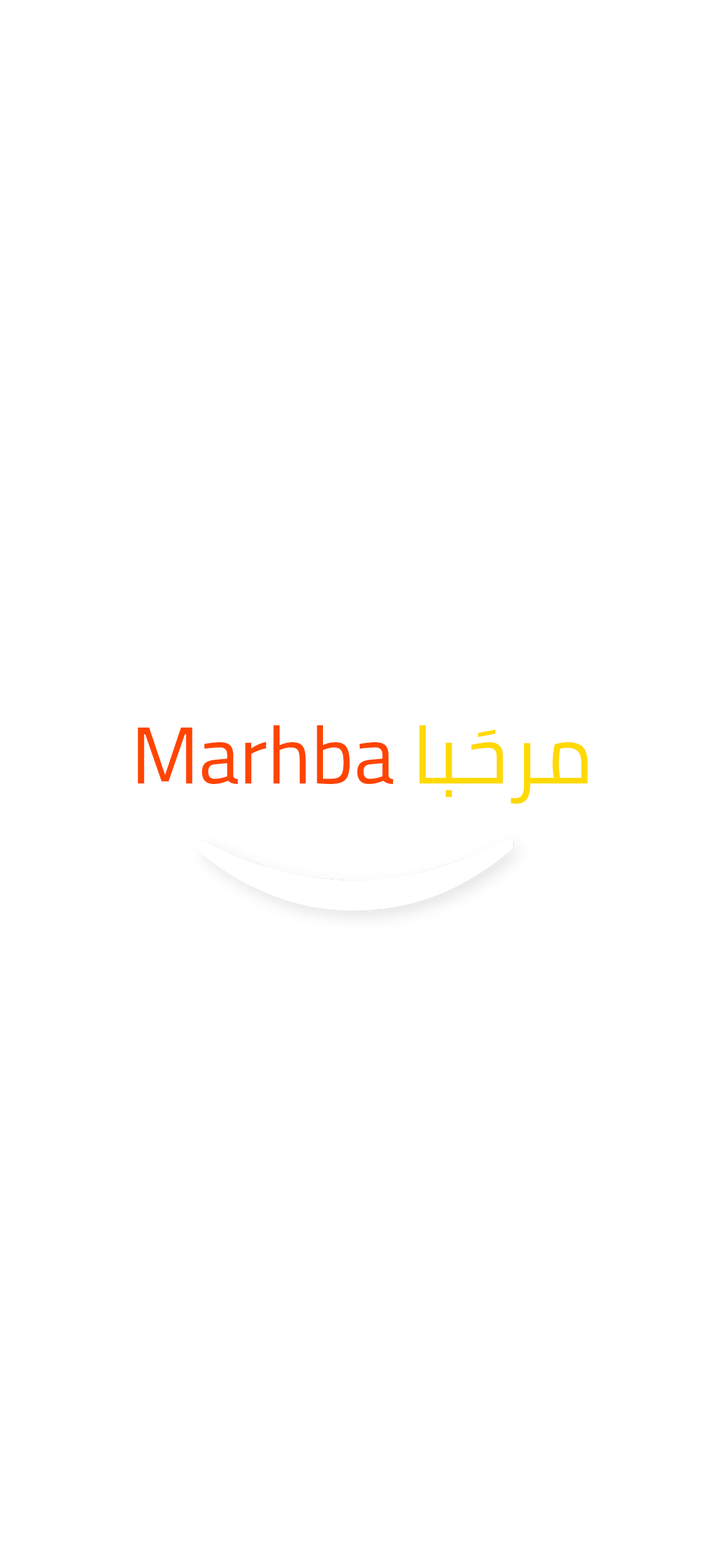
<style>
.page{position:relative;width:725px;height:1568px;background:#ffffff}
.page>*{position:absolute;margin:0}
.t1{font:81.1px "Cairo-Regular";color:#ff4500}
.t2{font:81.1px "Cairo-Regular";color:#ffd900}
</style>
<div class="page">
<p class="t1" style="left:138px;top:725px;width:450px;height:79px">Marhba<span class="t2"> مرحَبا</span></p>
</div>
